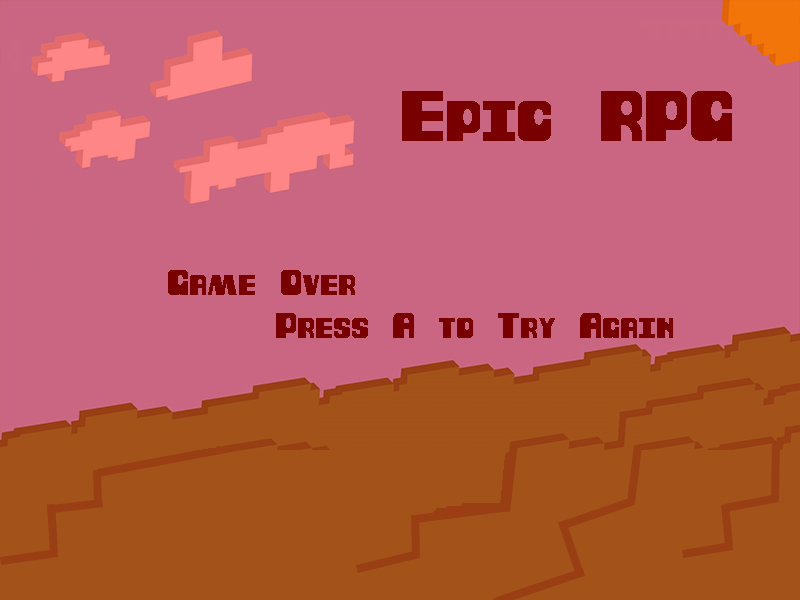
<style>
.page{position:relative;width:800px;height:600px;background:#ca6682}
.page>*{position:absolute;margin:0}
.t1{font:72px "DuckHunt";color:#790000}
.t2{font:36px "DuckHunt";color:#790000}
</style>
<div class="page">
<p class="t1" style="left:402px;top:91px;width:330px;height:50px">Epic RPG</p>
<p class="t2" style="left:168px;top:270px;width:505px;height:68px">Game Over<br>   Press A to Try Again</p>
</div>
